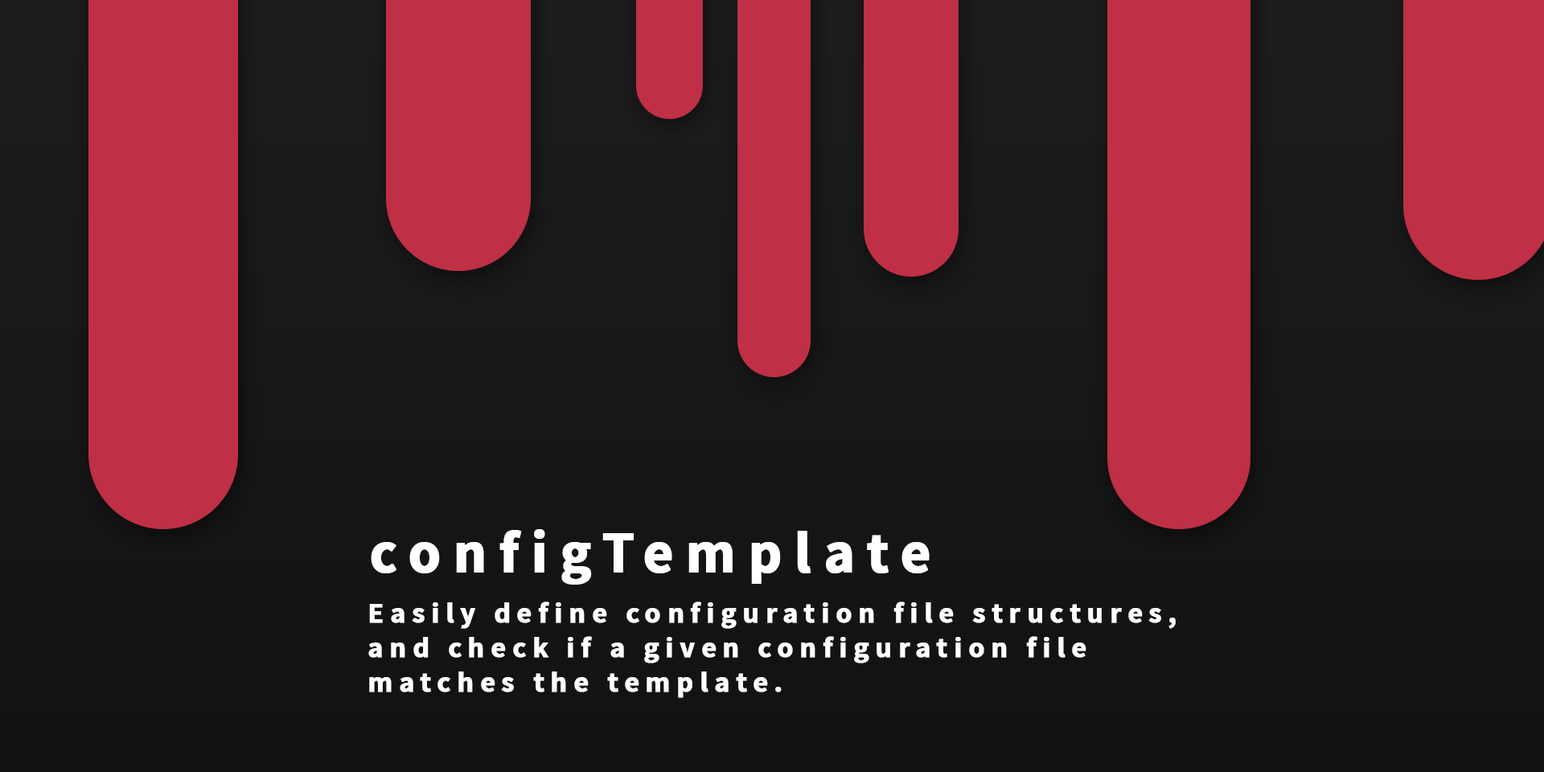
<style>
.page{position:relative;width:1544px;height:772px;background:#bf2f46}
.page>*{position:absolute;margin:0}
.t1{font:57.8px "Assistant-Bold";letter-spacing:0.2em;color:#ffffff;font-weight:bold}
.t2{font:28.9px "Assistant-Bold";letter-spacing:0.2em;color:#ffffff;font-weight:bold}
</style>
<div class="page">
<p class="t1" style="left:371px;top:529px;width:559px;height:56px">configTemplate</p>
<p class="t2" style="left:368px;top:602px;width:808px;height:96px">Easily define configuration file structures,<br>and check if a given configuration file<br>matches the template.</p>
</div>
